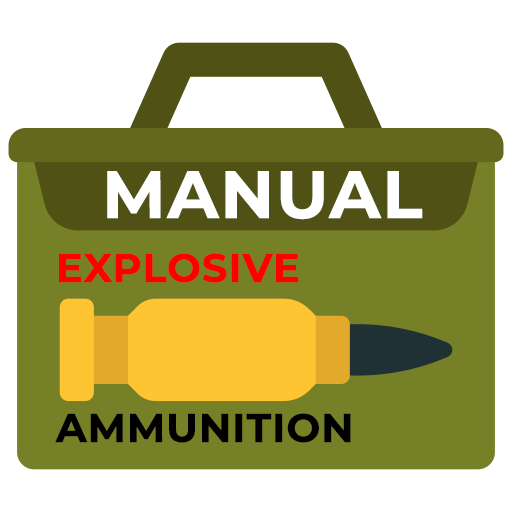
<style>
.page{position:relative;width:512px;height:512px;background:#ffffff}
.page>*{position:absolute;margin:0}
.t1{font:66.7px "Montserrat-Bold";color:#ffffff;font-weight:bold}
.t2{font:40px/40px "Montserrat-Bold";color:#000000;font-weight:bold}
.t3{font:40px/40px "Montserrat-Bold";color:#ff0000;font-weight:bold}
</style>
<div class="page">
<p class="t1" style="left:107px;top:171px;width:316px;height:49px">MANUAL</p>
<p class="t2" style="left:55px;top:253px;width:296px;height:190px"><span class="t3">EXPLOSIVE<br><br><br><br></span>AMMUNITION</p>
</div>
